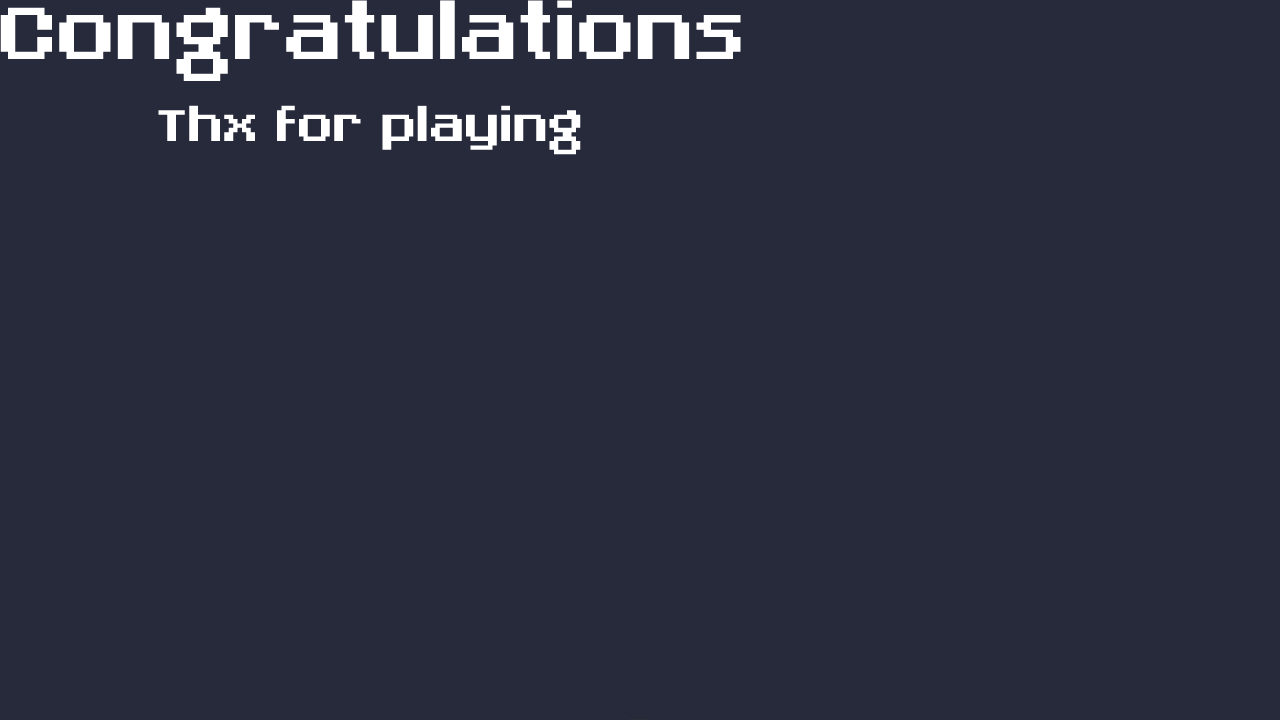
<style>
.page{position:relative;width:1280px;height:720px;background:#272a3b}
.page>*{position:absolute;margin:0}
.t1{font:100px "#ZFTerminal";color:#ffffff}
.t2{font:60px "#ZFTerminal";color:#ffffff}
</style>
<div class="page">
<p class="t1" style="left:0px;top:0px;width:741px;height:81px">Congratulations</p>
<p class="t2" style="left:158px;top:105px;width:423px;height:50px">Thx for playing</p>
</div>
